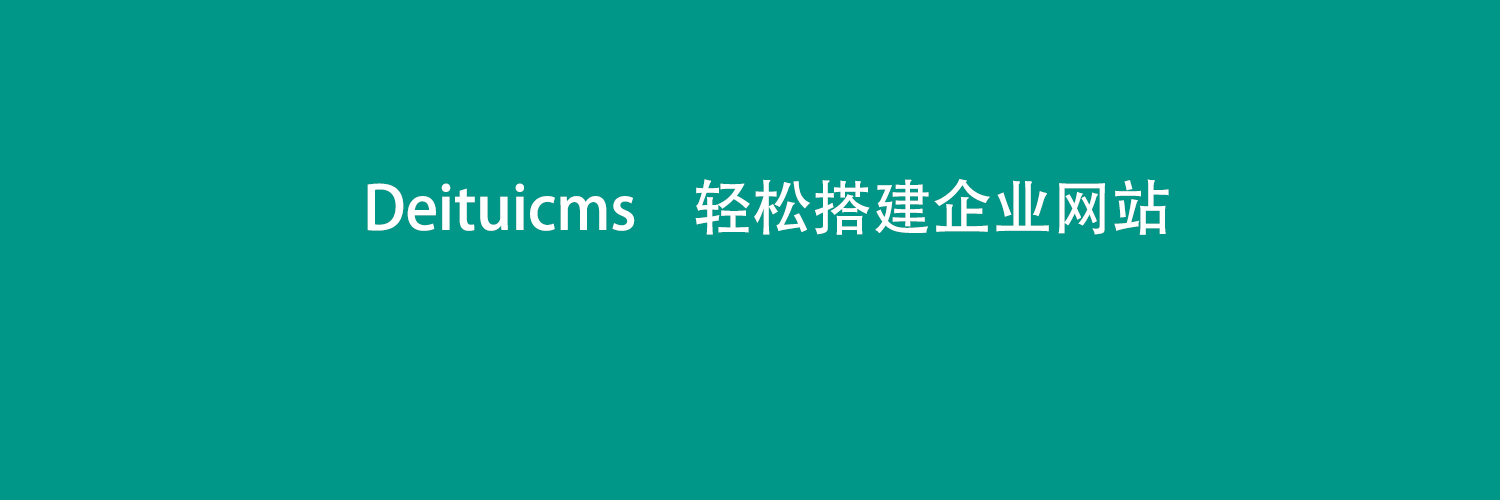
<style>
.page{position:relative;width:1500px;height:500px;background:#009688}
.page>*{position:absolute;margin:0}
.t1{font:60px "AdobeHeitiStd-Regular";color:#ffffff}
</style>
<div class="page">
<p class="t1" style="left:367px;top:183px;width:268px;height:48px">Deituicms</p>
<p class="t1" style="left:695px;top:179px;width:474px;height:56px">轻松搭建企业网站</p>
</div>
